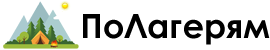
<style>
.page{position:relative;width:270px;height:50px;background:#ffffff}
.page>*{position:absolute;margin:0}
.t1{font:33.3px "CenturyGothic-Bold";color:#000000}
</style>
<div class="page">
<p class="t1" style="left:83px;top:14px;width:187px;height:31px">ПоЛагерям</p>
</div>
